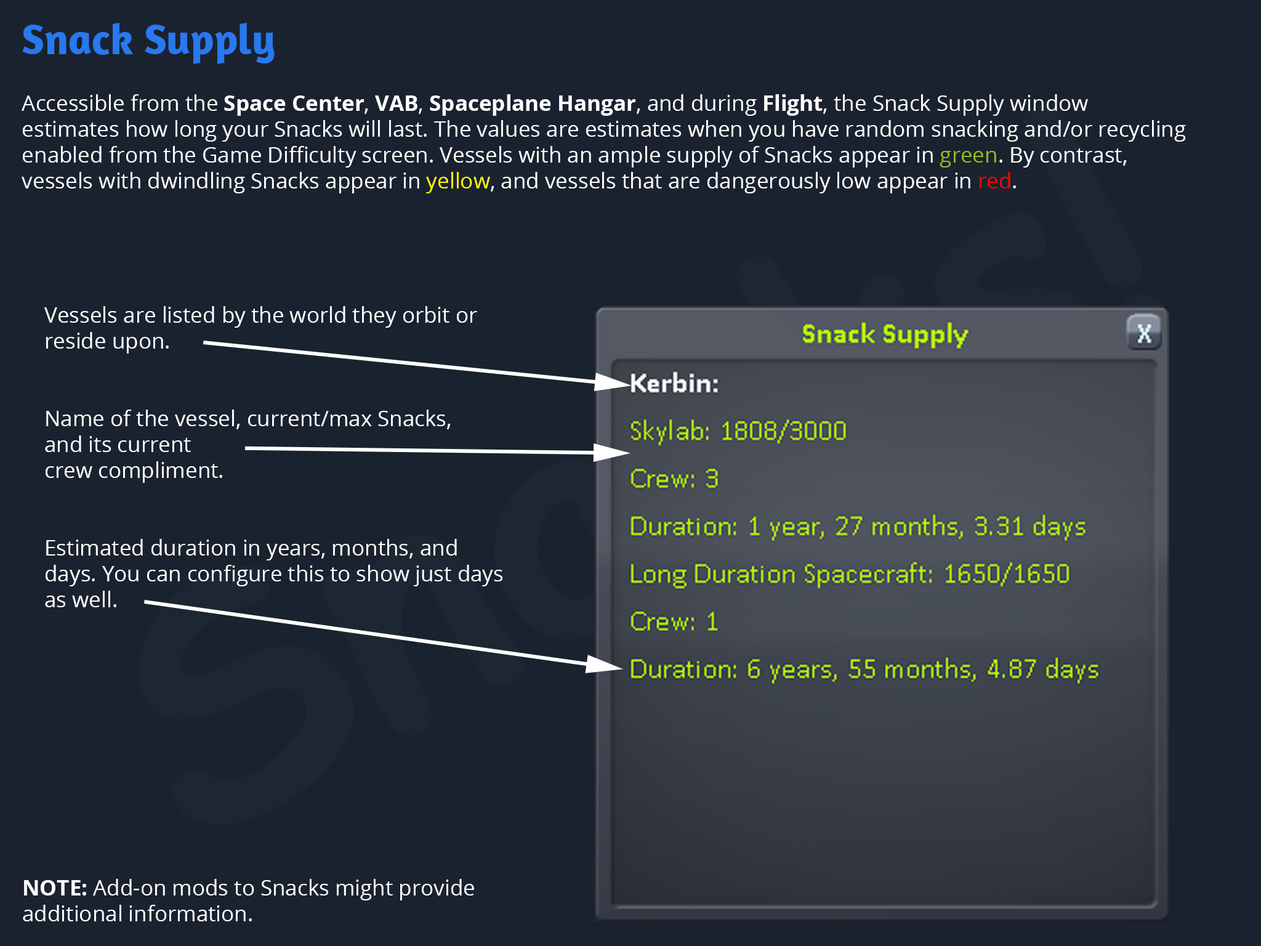
<style>
.page{position:relative;width:1261px;height:946px;background:#1a222f}
.page>*{position:absolute;margin:0}
.t1{font:43.1px "Amaranth-Bold";color:#2978ef}
.t2{font:21.5px "OpenSans";color:#ffffff}
.t3{font:21.5px "OpenSans-Bold";color:#ffffff}
.t4{font:21.5px "OpenSans";color:#8fbe1e}
.t5{font:21.5px "OpenSans";color:#fffc00}
.t6{font:21.5px "OpenSans";color:#ff0000}
</style>
<div class="page">
<p class="t1" style="left:22px;top:23px;width:253px;height:41px">Snack Supply</p>
<p class="t2" style="left:22px;top:94px;width:1164px;height:99px">Accessible from the <span class="t3">Space Center</span>, <span class="t3">VAB</span>, <span class="t3">Spaceplane Hangar</span>, and during <span class="t3">Flight</span>, the Snack Supply window estimates how long your Snacks will last. The values are estimates when you have random snacking and/or recycling enabled from the Game Difficulty screen. Vessels with an ample supply of Snacks appear in <span class="t4">green</span>. By contrast, vessels with dwindling Snacks appear in <span class="t5">yellow</span>, and vessels that are dangerously low appear in <span class="t6">red</span>.</p>
<p class="t2" style="left:44px;top:306px;width:459px;height:301px">Vessels are listed by the world they orbit or<br>reside upon.<br><br><br>Name of the vessel, current/max Snacks, <br>and its current<br>crew compliment.<br><br><br>Estimated duration in years, months, and<br>days. You can configure this to show just days<br>as well.</p>
<p class="t2" style="left:23px;top:879px;width:451px;height:42px"><span class="t3">NOTE: </span>Add-on mods to Snacks might provide<br>additional information.</p>
</div>
